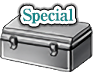
<style>
.page{position:relative;width:93px;height:72px;background:#ffffff}
.page>*{position:absolute;margin:0}
.t1{font:16px "RyuminPro-ExBold";letter-spacing:-0.04em;color:#168486}
</style>
<div class="page">
<p class="t1" style="left:23px;top:8px;width:51px;height:16px">Special</p>
</div>
